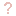
<style>
.page{position:relative;width:16px;height:16px;background:#ffffff}
.page>*{position:absolute;margin:0}
.t1{font:17px "Helvetica-Bold";color:#e0a69f}
</style>
<div class="page">
<p class="t1" style="left:4px;top:2px;width:8px;height:12px;opacity:0.75">?</p>
</div>
